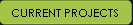
<style>
.page{position:relative;width:133px;height:25px;background:#a4c447}
.page>*{position:absolute;margin:0}
.t1{font:11.2px "CenturyGothic";color:#000000}
</style>
<div class="page">
<p class="t1" style="left:12px;top:9px;width:106px;height:8px">CURRENT PROJECTS</p>
</div>
